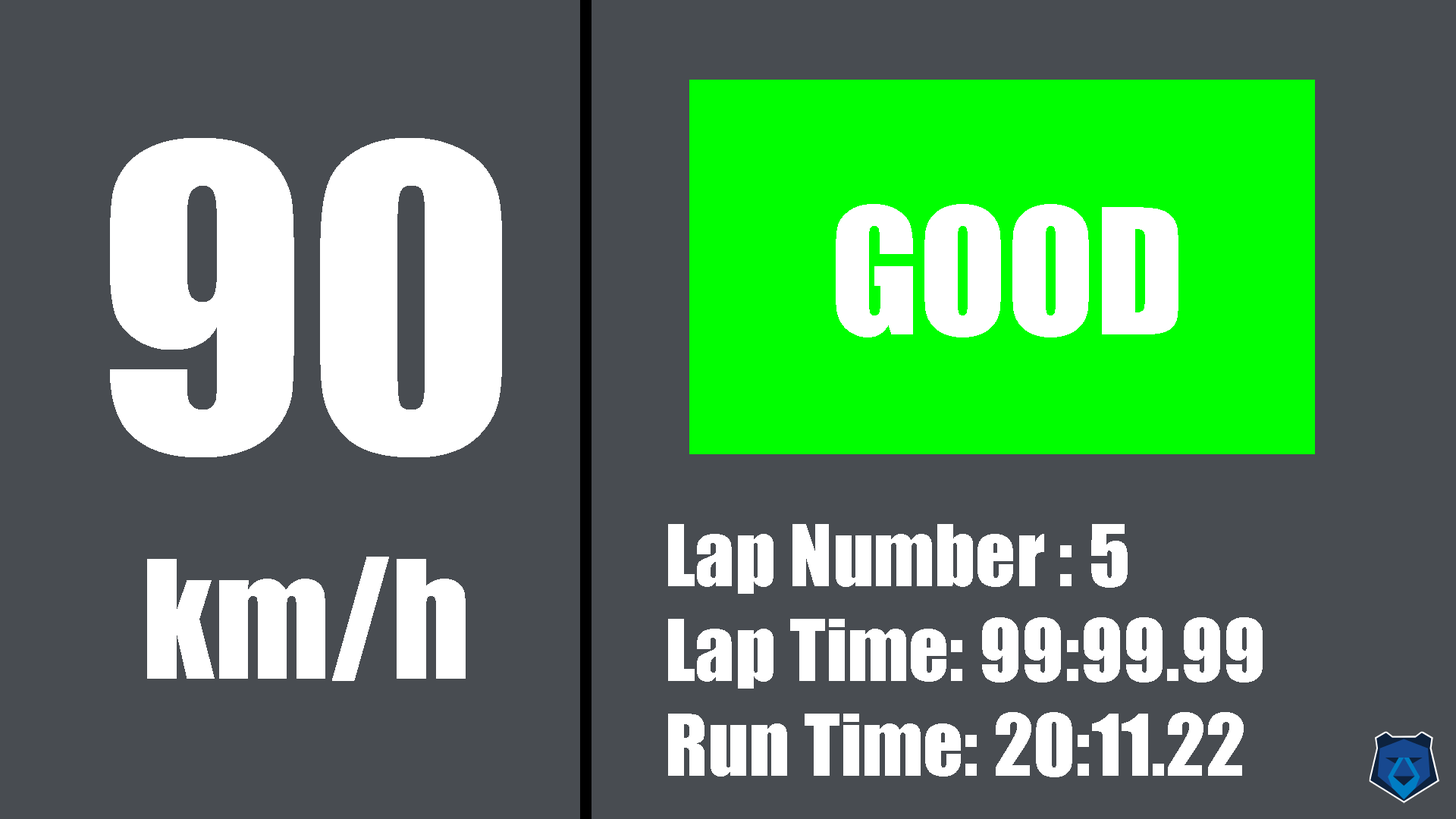
<style>
.page{position:relative;width:1456px;height:819px;background:#484c51}
.page>*{position:absolute;margin:0}
.t1{font:151.7px/227.5px "Impact";color:#ffffff}
.t2{font:388.6px/227.5px "Impact";color:#ffffff}
.t3{font:161.1px "Impact";color:#ffffff}
.t4{font:79px "Impact";color:#ffffff}
</style>
<div class="page">
<p class="t1" style="left:110px;top:138px;width:392px;height:543px;text-align:center"><span class="t2">90<br></span>km/h</p>
<p class="t3" style="left:836px;top:204px;width:342px;height:133px">GOOD</p>
<p class="t4" style="left:668px;top:524px;width:595px;height:253px">Lap Number : 5<br>Lap Time: 99:99.99<br>Run Time: 20:11.22</p>
</div>
